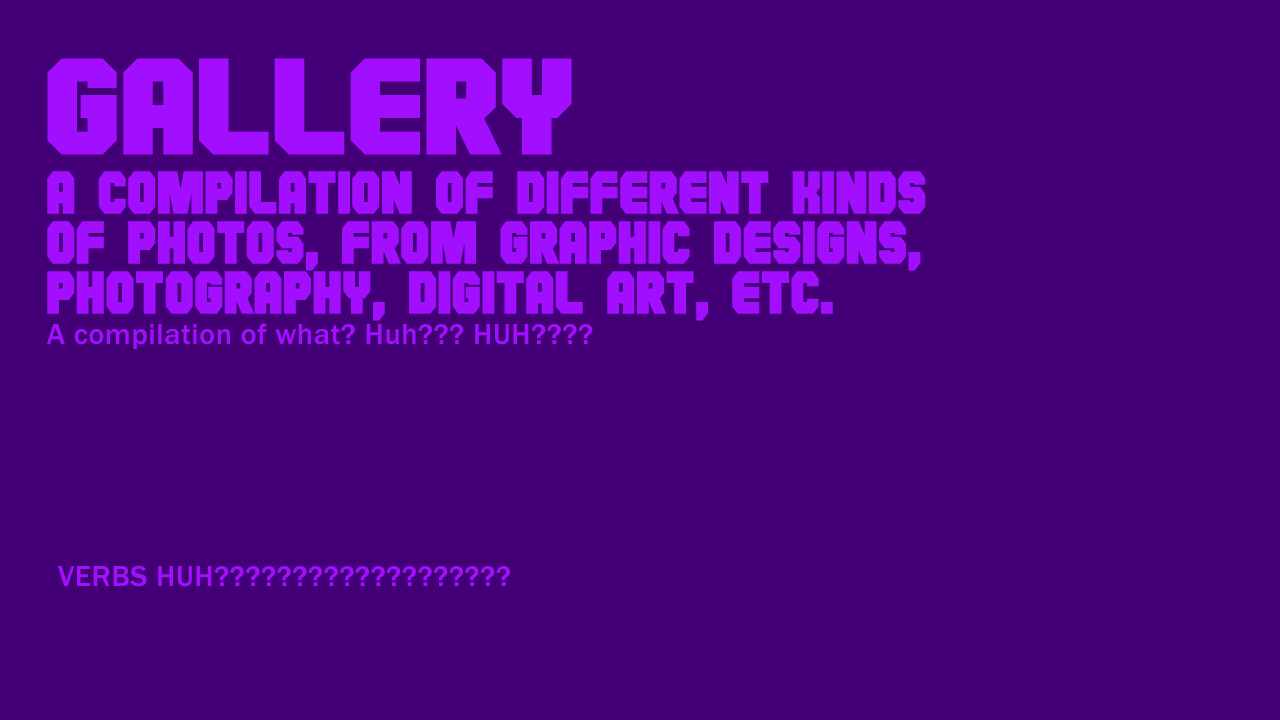
<style>
.page{position:relative;width:1280px;height:720px;background:#430076}
.page>*{position:absolute;margin:0}
.t1{font:136px "Hauser-Bold";letter-spacing:0.02em;color:#a20fff}
.t2{font:70px/50px "HauserCondensed-Bold";letter-spacing:0.02em;color:#a20fff}
.t3{font:30px "FranklinGothic-Medium";letter-spacing:0.02em;color:#a20fff}
</style>
<div class="page">
<p class="t1" style="left:47px;top:58px;width:525px;height:97px">GALLERY</p>
<p class="t2" style="left:47px;top:171px;width:879px;height:150px">a compilation of different kinds<br>of photos, from graphic designs,<br>photography, digital art, etc.</p>
<p class="t3" style="left:47px;top:323px;width:546px;height:26px">A compilation of what? Huh??? HUH????</p>
<p class="t3" style="left:58px;top:565px;width:452px;height:22px">VERBS HUH???????????????????</p>
</div>
